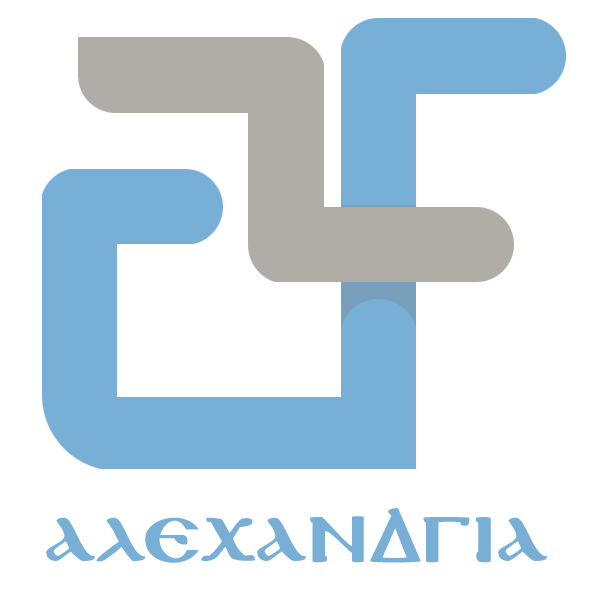
<style>
.page{position:relative;width:600px;height:600px;background:#ffffff}
.page>*{position:absolute;margin:0}
.t1{font:100px "CopticNormal";color:#78afd7}
</style>
<div class="page">
<p class="t1" style="left:46px;top:508px;width:501px;height:55px">aleyandgia</p>
</div>
